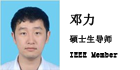
<style>
.page{position:relative;width:140px;height:70px;background:#ffffff}
.page>*{position:absolute;margin:0}
.t1{font:8.3px "SimSun";color:#090909;font-weight:bold}
.t2{font:12.5px "SimSun";color:#090909;font-weight:bold}
</style>
<div class="page">
<p class="t1" style="left:69px;top:13px;width:49px;height:45px"><span class="t2">邓力<br></span>硕士生导师<br>IEEE Member</p>
</div>
